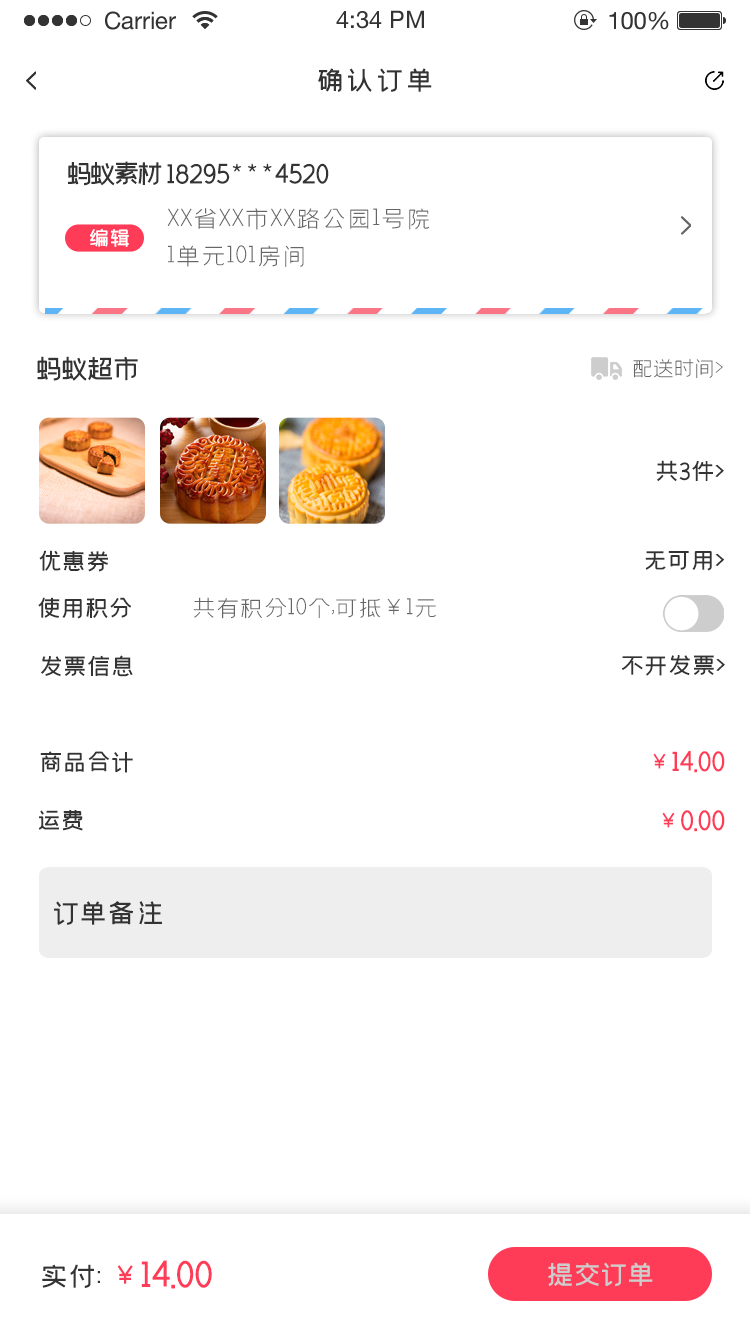
<style>
.page{position:relative;width:750px;height:1334px;background:#ffffff}
.page>*{position:absolute;margin:0}
.t1{font:30px "59--Regular";color:#333333;text-transform:uppercase}
.t2{font:29.4px "59--Regular";letter-spacing:-0.2em;color:#333333;text-transform:uppercase}
.t3{font:29.4px "59--Regular";letter-spacing:-0.08em;color:#333333;text-transform:uppercase}
.t4{font:27.1px/37.3px "58--Regular";letter-spacing:-0.06em;color:#666666;text-transform:uppercase}
.t5{font:22.6px "59--Regular";letter-spacing:-0.14em;color:#ffffff;text-transform:uppercase}
.t6{font:30px "59--Regular";letter-spacing:-0.14em;color:#333333;text-transform:uppercase}
.t7{font:24px "58--Regular";letter-spacing:-0.14em;color:#666666;text-transform:uppercase}
.t8{font:26px "59--Regular";letter-spacing:-0.08em;color:#333333;text-transform:uppercase}
.t9{font:26px "58--Regular";letter-spacing:-0.08em;color:#666666;text-transform:uppercase}
.t10{font:30px "59--Regular";letter-spacing:-0.08em;color:#ff3c57;text-transform:uppercase}
.t11{font:24px "59--Regular";letter-spacing:-0.08em;color:#ff3c57;text-transform:uppercase}
.t12{font:30px "59--Regular";letter-spacing:-0.08em;color:#333333;text-transform:uppercase}
.t13{font:39.9px "59--Regular";letter-spacing:-0.08em;color:#ff3c57;text-transform:uppercase}
.t14{font:30px "59--Regular";letter-spacing:-0.1em;color:#cdcdcd;text-transform:uppercase}
</style>
<div class="page">
<p class="t1" style="left:318px;top:68px;width:114px;height:24px">确认订单</p>
<p class="t2" style="left:68px;top:161px;width:94px;height:25px">蚂蚁素材</p>
<p class="t3" style="left:167px;top:163px;width:162px;height:21px">18295***4520</p>
<p class="t4" style="left:167px;top:208px;width:263px;height:59px">xx省xx市xx路公园1号院<br>1单元101房间</p>
<p class="t5" style="left:90px;top:228px;width:39px;height:19px">编 辑</p>
<p class="t6" style="left:37px;top:356px;width:101px;height:25px">蚂蚁超市</p>
<p class="t7" style="left:633px;top:359px;width:90px;height:19px">配送时间&gt;</p>
<p class="t8" style="left:656px;top:460px;width:68px;height:22px">共3件&gt;</p>
<p class="t8" style="left:39px;top:550px;width:69px;height:22px">优惠券</p>
<p class="t8" style="left:645px;top:551px;width:80px;height:20px">无可用&gt;</p>
<p class="t8" style="left:38px;top:597px;width:94px;height:22px">使用积分</p>
<p class="t9" style="left:193px;top:597px;width:243px;height:22px">共有积分10个,可抵￥1元</p>
<p class="t8" style="left:41px;top:655px;width:92px;height:22px">发票信息</p>
<p class="t8" style="left:621px;top:655px;width:104px;height:21px">不开发票&gt;</p>
<p class="t8" style="left:40px;top:751px;width:93px;height:22px">商品合计</p>
<p class="t10" style="left:653px;top:751px;width:72px;height:22px"><span class="t11">￥</span>14.00</p>
<p class="t8" style="left:38px;top:810px;width:45px;height:21px">运费</p>
<p class="t10" style="left:662px;top:810px;width:63px;height:22px"><span class="t11">￥</span>0.00</p>
<p class="t12" style="left:54px;top:901px;width:108px;height:24px">订单备注</p>
<p class="t13" style="left:42px;top:1260px;width:170px;height:29px"><span class="t12">实付:</span><span class="t10">￥</span>14.00</p>
<p class="t14" style="left:548px;top:1262px;width:105px;height:25px">提交订单</p>
</div>
